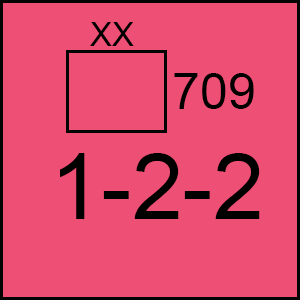
<style>
.page{position:relative;width:300px;height:300px;background:#ee4f74}
.page>*{position:absolute;margin:0}
.t1{font:33.3px "ArialMT";color:#000000}
.t2{font:50px "ArialMT";color:#000000}
.t3{font:91.7px "ArialMT";color:#000000}
</style>
<div class="page">
<p class="t1" style="left:90px;top:22px;width:44px;height:24px">XX</p>
<p class="t2" style="left:174px;top:73px;width:80px;height:36px">709</p>
<p class="t3" style="left:60px;top:153px;width:200px;height:66px">1-2-2</p>
</div>
